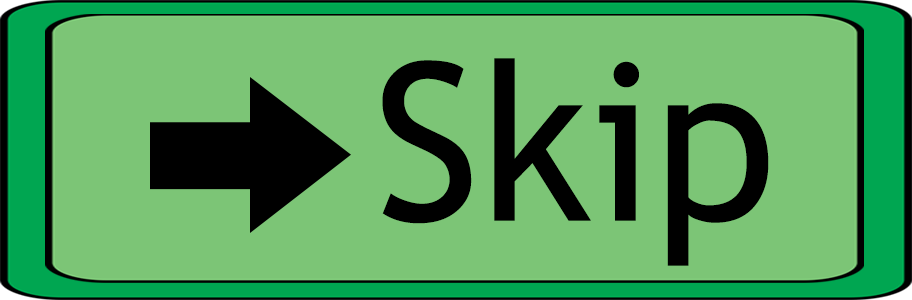
<style>
.page{position:relative;width:912px;height:300px;background:#7cc576}
.page>*{position:absolute;margin:0}
.t1{font:220px "TrebuchetMS";color:#000000}
</style>
<div class="page">
<p class="t1" style="left:382px;top:58px;width:387px;height:208px">Skip</p>
</div>
